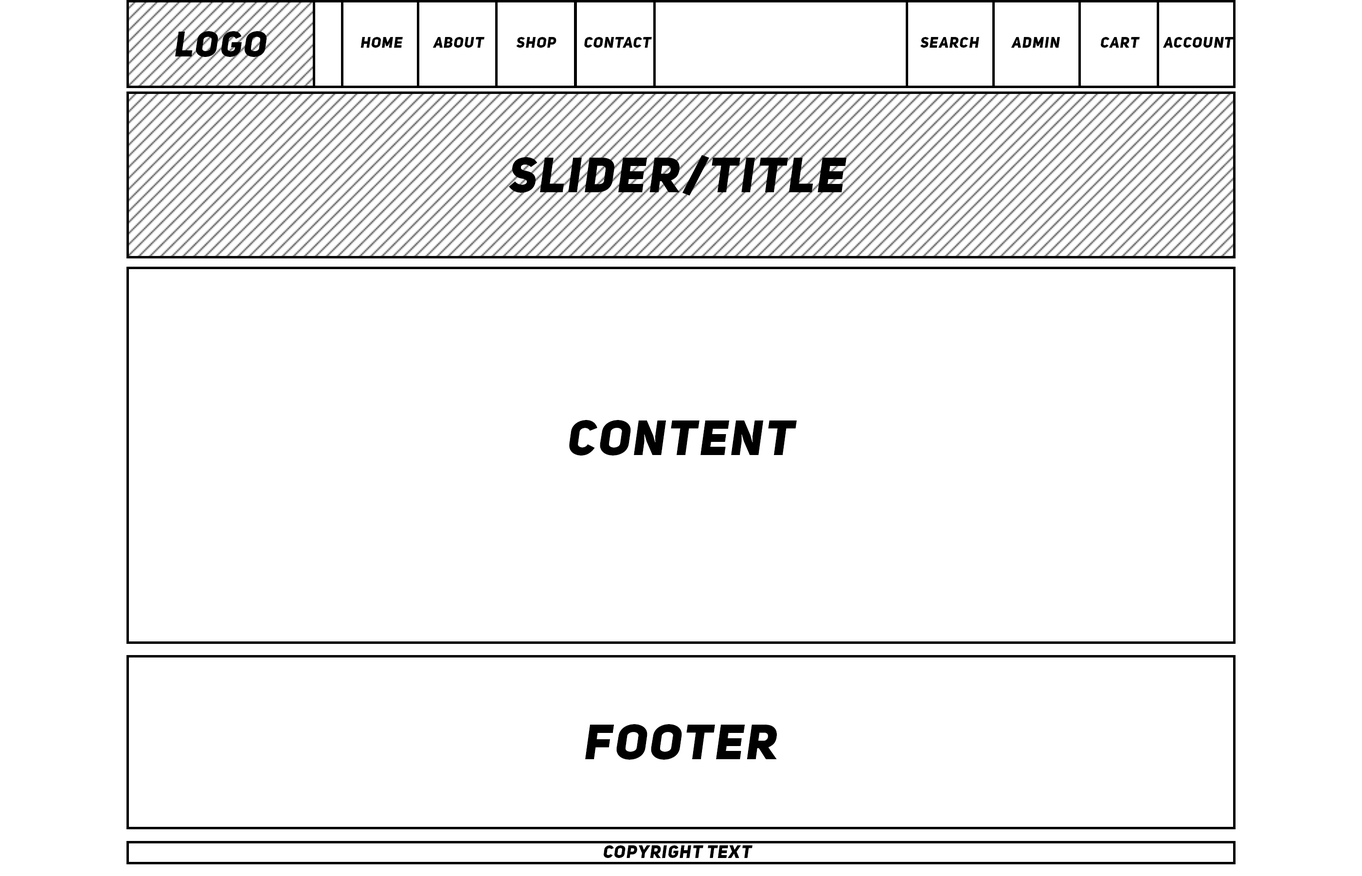
<style>
.page{position:relative;width:1362px;height:876px;background:#ffffff}
.page>*{position:absolute;margin:0}
.t1{font:35px "UniSansHeavyItalicCAPS";letter-spacing:0.05em;color:#000000;text-transform:uppercase}
.t2{font:14.6px "UniSansHeavyItalicCAPS";letter-spacing:0.05em;color:#000000;text-transform:uppercase}
.t3{font:48.6px "UniSansHeavyItalicCAPS";letter-spacing:0.05em;color:#000000;text-transform:uppercase}
.t4{font:17.4px "UniSansHeavyItalicCAPS";letter-spacing:0.05em;color:#000000;text-transform:uppercase}
</style>
<div class="page">
<p class="t1" style="left:175px;top:31px;width:92px;height:26px">Logo</p>
<p class="t2" style="left:360px;top:37px;width:43px;height:11px">hOME</p>
<p class="t2" style="left:432px;top:37px;width:52px;height:11px">ABOUT</p>
<p class="t2" style="left:516px;top:37px;width:40px;height:11px">shop</p>
<p class="t2" style="left:584px;top:37px;width:68px;height:11px">Contact</p>
<p class="t2" style="left:920px;top:37px;width:59px;height:11px">Search</p>
<p class="t2" style="left:1011px;top:37px;width:49px;height:11px">Admin</p>
<p class="t2" style="left:1101px;top:37px;width:39px;height:11px">Cart</p>
<p class="t2" style="left:1163px;top:37px;width:71px;height:11px">Account</p>
<p class="t3" style="left:509px;top:155px;width:338px;height:41px">Slider/title</p>
<p class="t3" style="left:569px;top:420px;width:228px;height:35px">Content</p>
<p class="t3" style="left:585px;top:724px;width:192px;height:35px">footer</p>
<p class="t4" style="left:604px;top:845px;width:148px;height:13px">Copyright text</p>
</div>
